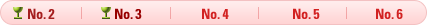
<style>
.page{position:relative;width:427px;height:25px}
.page>*{position:absolute;margin:0}
.t1{font:14px "Univeconbol";letter-spacing:-0.025em;color:#a51e1e}
.t2{font:14px "Univeconbol";letter-spacing:-0.025em;color:#970000}
.t3{font:14px "Univeconbol";letter-spacing:-0.025em;color:#d22222}
</style>
<div class="page">
<p class="t1" style="left:28px;top:8px;width:27px;height:11px">No. 2</p>
<p class="t2" style="left:115px;top:8px;width:27px;height:11px">No. 3</p>
<p class="t3" style="left:202px;top:8px;width:27px;height:11px">No. 4</p>
<p class="t3" style="left:293px;top:8px;width:27px;height:11px">No. 5</p>
<p class="t3" style="left:376px;top:8px;width:27px;height:11px">No. 6</p>
</div>
